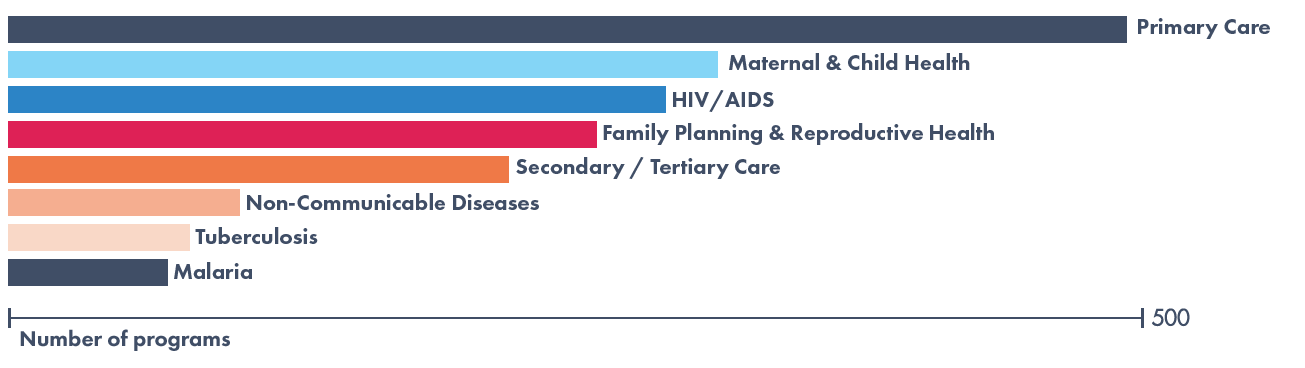
<style>
.page{position:relative;width:1305px;height:368px;background:#ffffff}
.page>*{position:absolute;margin:0}
.t1{font:22.2px "FuturaPT-Heavy";color:#404e66}
.t2{font:22.2px "FuturaExtended";color:#404e66}
.t3{font:22.2px "FuturaLight";color:#404e66}
</style>
<div class="page">
<p class="t1" style="left:1138px;top:18px;width:132px;height:21px">Primary Care</p>
<p class="t1" style="left:729px;top:53px;width:241px;height:17px">Maternal &amp; Child Health</p>
<p class="t1" style="left:673px;top:90px;width:101px;height:22px">HIV/AIDS</p>
<p class="t1" style="left:603px;top:123px;width:391px;height:22px">Family Planning &amp; Reproductive Health</p>
<p class="t1" style="left:516px;top:157px;width:264px;height:22px">Secondary / Tertiary Care</p>
<p class="t1" style="left:247px;top:193px;width:292px;height:17px">Non-Communicable Diseases</p>
<p class="t1" style="left:195px;top:227px;width:123px;height:17px">Tuberculosis</p>
<p class="t1" style="left:174px;top:262px;width:78px;height:17px">Malaria</p>
<p class="t2" style="left:1152px;top:308px;width:38px;height:19px"><span class="t3"> </span>500</p>
<p class="t1" style="left:20px;top:329px;width:210px;height:22px">Number of programs</p>
</div>
